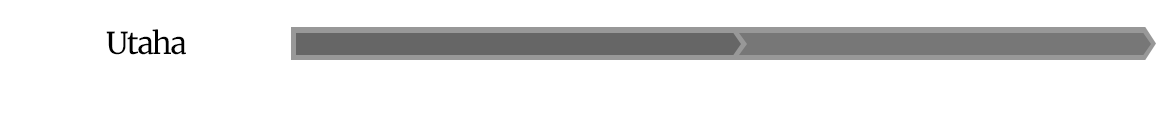
<style>
.page{position:relative;width:1165px;height:129px;background:#ffffff}
.page>*{position:absolute;margin:0}
.t1{font:30px "Merriweather-Regular";letter-spacing:-0.06em;color:#000000}
</style>
<div class="page">
<p class="t1" style="left:106px;top:29px;width:80px;height:26px">Utaha</p>
</div>
